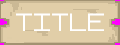
<style>
.page{position:relative;width:120px;height:45px;background:#e1cea8}
.page>*{position:absolute;margin:0}
.t1{font:24px "PFStardust";color:#ffffff}
</style>
<div class="page">
<p class="t1" style="left:16px;top:13px;width:88px;height:18px">TITLE</p>
</div>
